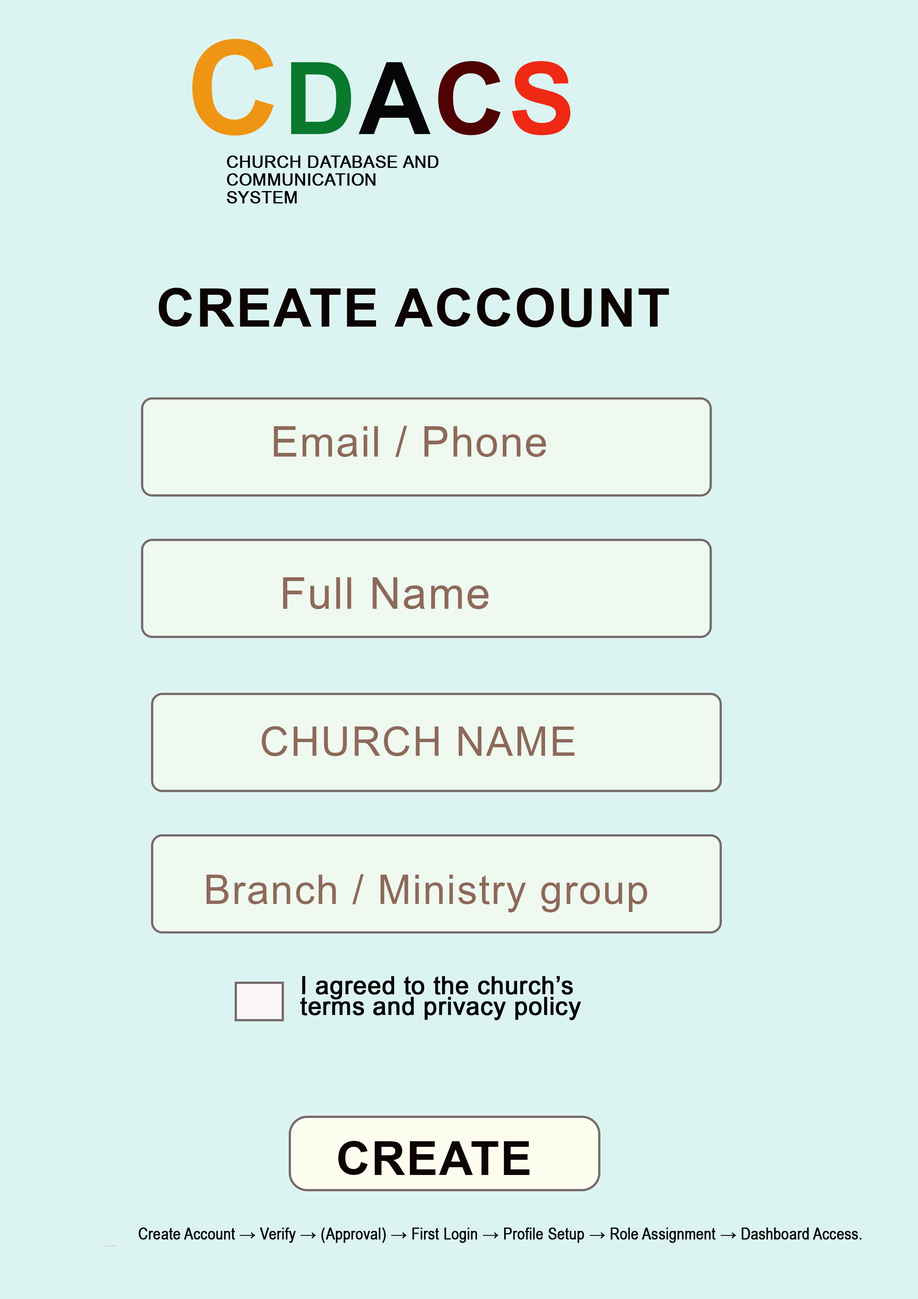
<style>
.page{position:relative;width:918px;height:1299px;background:#dcf4f1}
.page>*{position:absolute;margin:0}
.t1{font:130.4px "Arial-BoldMT";color:#ef9514;font-weight:bold}
.t2{font:100px "Arial-BoldMT";color:#09792e;font-weight:bold}
.t3{font:100px "Arial-BoldMT";color:#060606;font-weight:bold}
.t4{font:100px "Arial-BoldMT";color:#4f0202;font-weight:bold}
.t5{font:100px "Arial-BoldMT";color:#ef2914;font-weight:bold}
.t6{font:16.9px/17.8px "ArialNarrow";color:#030202;font-weight:bold;scale:1.21 1}
.t7{font:53.4px "Arial-BoldMT";color:#0d0303;font-weight:bold}
.t8{font:42.3px "ArialNarrow";color:#8d695a;font-weight:bold;scale:1.21 1}
.t9{font:44.2px "ArialNarrow";color:#8d695a;font-weight:bold;scale:1.21 1}
.t10{font:40.8px "ArialNarrow";color:#8d695a;font-weight:bold;scale:1.21 1}
.t11{font:24.6px/20.6px "ArialNarrow";color:#070707;font-weight:bold;scale:1.21 1}
.t12{font:46.9px "Arial-BoldMT";color:#0d0303;font-weight:bold}
.t13{font:16.2px "ArialNarrow";color:#060505;font-weight:bold}
.t14{font:0.3px/0.5px "ArialNarrow";font-weight:bold}
</style>
<div class="page">
<p class="t1" style="left:192px;top:39px;width:379px;height:97px">C<span class="t2">D</span><span class="t3">A</span><span class="t4">C</span><span class="t5">S</span></p>
<p class="t6" style="left:227px;top:155px;width:212px;height:49px">CHURCH DATABASE AND <br>COMMUNICATION <br>SYSTEM</p>
<p class="t7" style="left:158px;top:287px;width:511px;height:41px">CREATE ACCOUNT</p>
<p class="t8" style="left:274px;top:425px;width:272px;height:32px">Email / Phone</p>
<p class="t9" style="left:283px;top:577px;width:206px;height:32px">Full Name</p>
<p class="t10" style="left:262px;top:726px;width:313px;height:30px">CHURCH NAME</p>
<p class="t10" style="left:207px;top:874px;width:441px;height:39px">Branch / Ministry group</p>
<p class="t11" style="left:300px;top:976px;width:281px;height:44px">I agreed to the church’s<br>terms and privacy policy</p>
<p class="t12" style="left:338px;top:1140px;width:192px;height:35px">CREATE</p>
<p class="t13" style="left:138px;top:1227px;width:724px;height:16px">Create Account → Verify → (Approval) → First Login → Profile Setup → Role Assignment → Dashboard Access.</p>
<p class="t14" style="left:104px;top:1245px;width:13px;height:1px">Create Account → Verify → (Approval) → First Login → Profile Setup → Role Assignment → Dashboard Access.</p>
</div>
